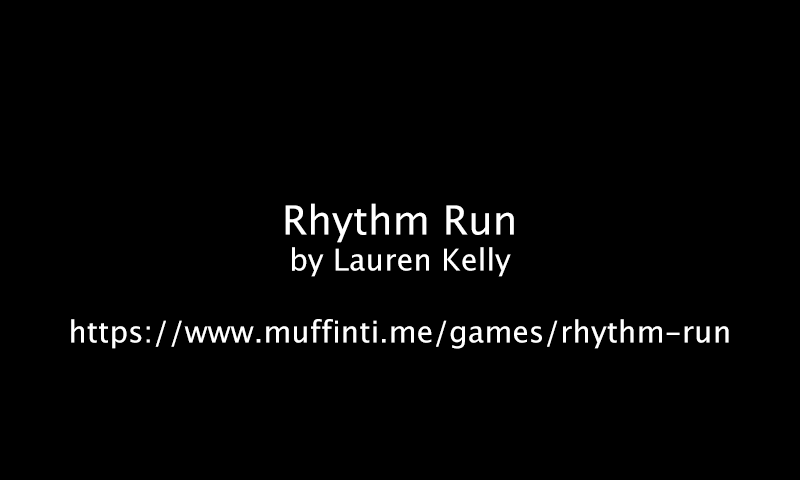
<style>
.page{position:relative;width:800px;height:480px;background:#000000}
.page>*{position:absolute;margin:0}
.t1{font:30px "LucidaGrande";color:#ffffff}
.t2{font:40px "LucidaGrande";color:#ffffff}
</style>
<div class="page">
<p class="t1" style="left:71px;top:203px;width:658px;height:146px;text-align:center"><span class="t2">Rhythm Run<br></span>by Lauren Kelly<br><br>https://www.muffinti.me/games/rhythm-run</p>
</div>
